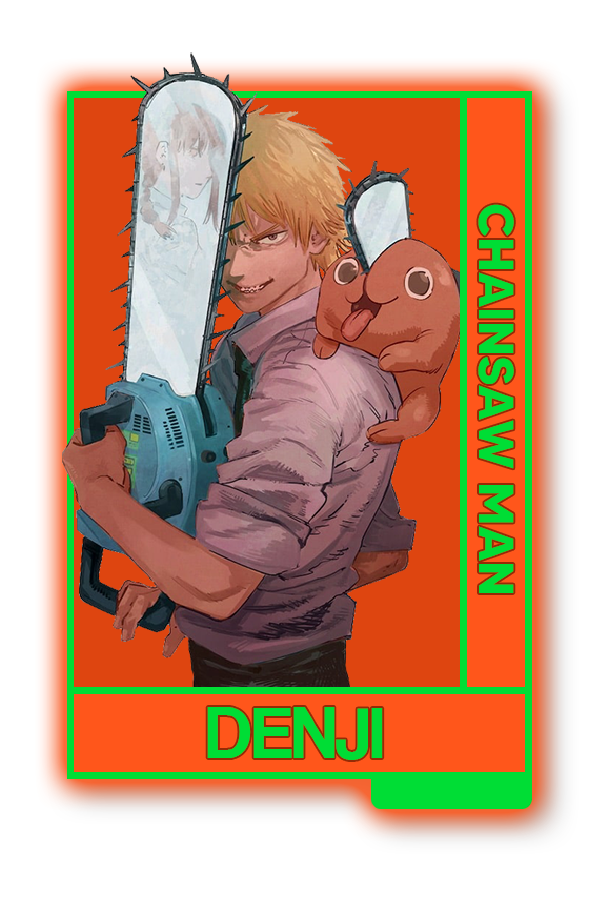
<style>
.page{position:relative;width:600px;height:900px;background:#ffffff}
.page>*{position:absolute;margin:0}
.t1{font:48.8px "MADETOMMY-Bold";color:#00dd35}
.t2{font:75px "CoolveticaRg-Regular";color:#00dd35}
</style>
<div class="page">
<p class="t1" style="left:478px;top:204px;width:36px;height:389px;rotate:90deg">CHAINSAW MAN</p>
<p class="t2" style="left:207px;top:707px;width:176px;height:53px">DENJI</p>
</div>
